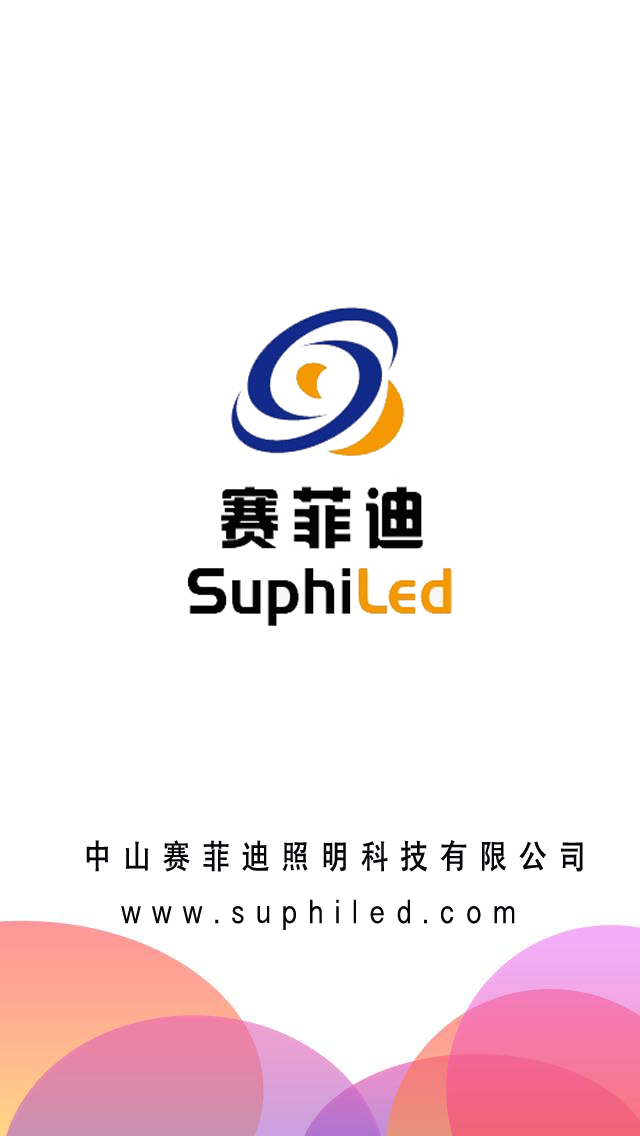
<style>
.page{position:relative;width:640px;height:1136px;background:#ffffff}
.page>*{position:absolute;margin:0}
.t1{font:33.6px "AdobeHeitiStd-Regular";letter-spacing:0.4em;color:#08060b;scale:0.84 1}
.t2{font:32.9px "DevanagariSangamMN";letter-spacing:0.4em;color:#08060b;scale:0.86 1}
</style>
<div class="page">
<p class="t1" style="left:86px;top:840px;width:497px;height:32px">中山赛菲迪照明科技有限公司</p>
<p class="t2" style="left:121px;top:899px;width:394px;height:31px">www.suphiled.com</p>
</div>
